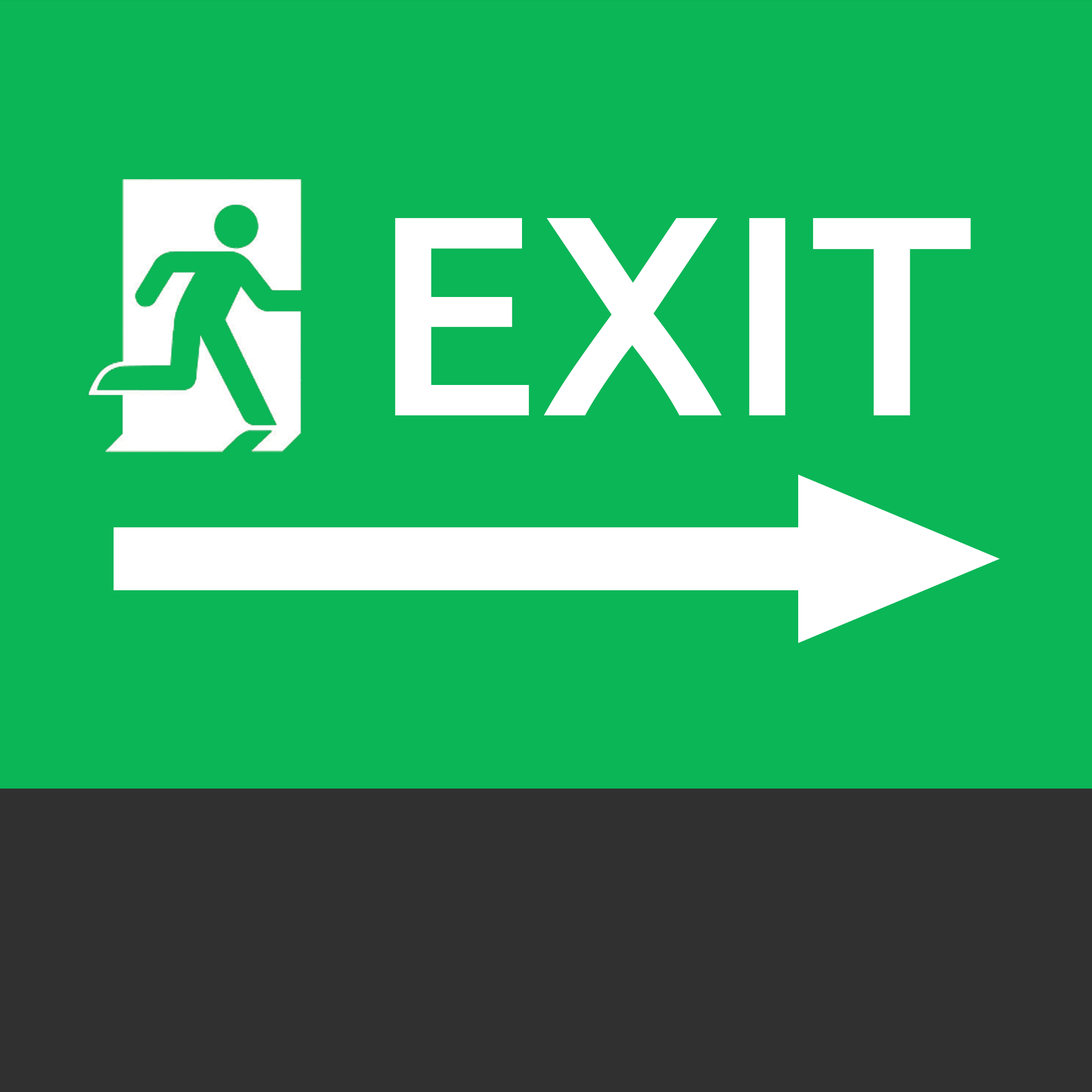
<style>
.page{position:relative;width:1092px;height:1092px;background:#0bb657}
.page>*{position:absolute;margin:0}
.t1{font:284.5px "Ubuntu-Medium";letter-spacing:0.001em;color:#ffffff}
</style>
<div class="page">
<p class="t1" style="left:395px;top:218px;width:576px;height:197px">EXIT</p>
</div>
